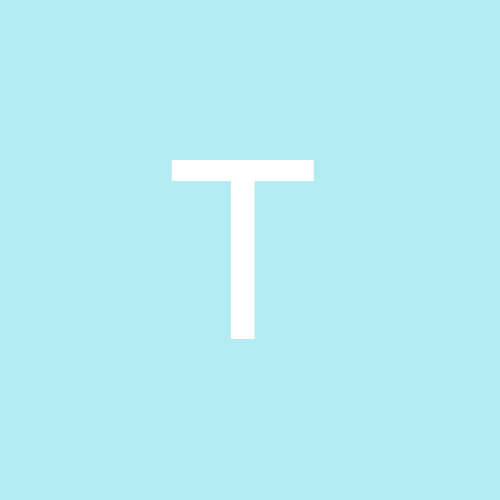
<style>
.page{position:relative;width:500px;height:500px;background:#b2ebf2}
.page>*{position:absolute;margin:0}
.t1{font:250px "ArialMT";color:#ffffff}
</style>
<div class="page">
<p class="t1" style="left:171px;top:160px;width:143px;height:179px">T</p>
</div>
